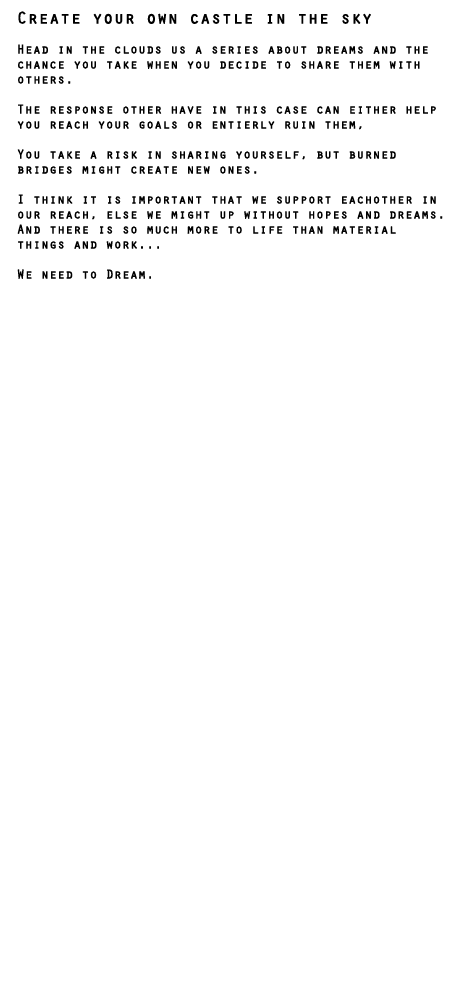
<style>
.page{position:relative;width:450px;height:1000px;background:#ffffff}
.page>*{position:absolute;margin:0}
.t1{font:12.5px "Orator-Regular";color:#000000;font-weight:bold}
.t2{font:16.7px "Orator-Regular";color:#000000;font-weight:bold}
</style>
<div class="page">
<p class="t1" style="left:17px;top:11px;width:426px;height:268px;text-align:right"><span class="t2">Create your own castle in the sky<br></span><br>Head in the clouds us a series about dreams and the<br>chance you take when you decide to share them with<br>others.<br><br>The response other have in this case can either help<br>you reach your goals or entierly ruin them,<br><br>You take a risk in sharing yourself, but burned <br>bridges might create new ones.<br><br>I think it is important that we support eachother in<br>our reach, else we might up without hopes and dreams.<br>And there is so much more to life than material <br>things and work... <br><br>We need to Dream.</p>
</div>
